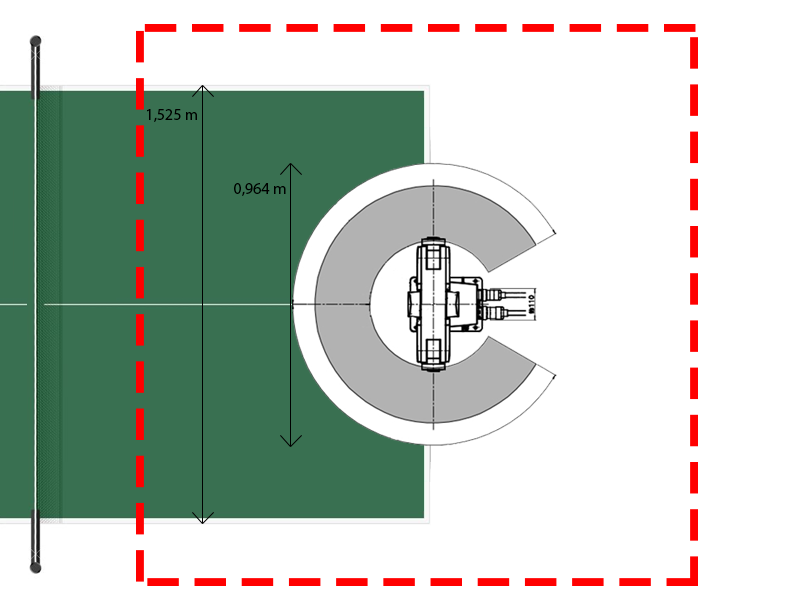
<style>
.page{position:relative;width:800px;height:600px;background:#ffffff}
.page>*{position:absolute;margin:0}
.t1{font:12px "MyriadPro-Regular";color:#000000}
</style>
<div class="page">
<p class="t1" style="left:147px;top:109px;width:50px;height:13px">1,525 m</p>
<p class="t1" style="left:234px;top:183px;width:52px;height:13px">0,964 m</p>
</div>
